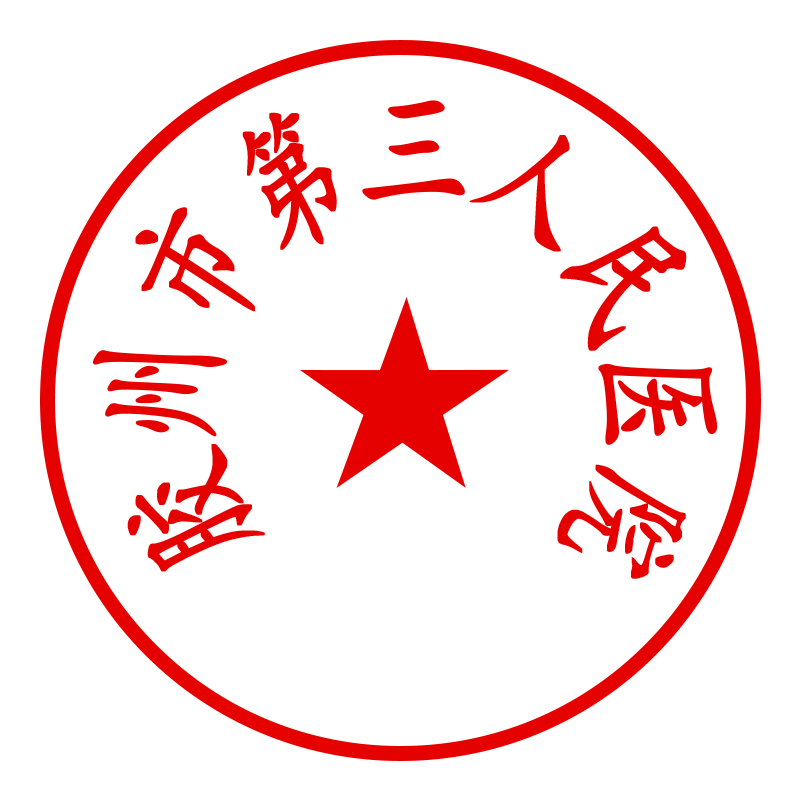
<style>
.page{position:relative;width:800px;height:800px;background:#ffffff}
.page>*{position:absolute;margin:0}
.t1{font:152.5px "KaiTi";letter-spacing:-0.1em;color:#e60101;font-weight:bold;scale:0.71 1}
</style>
<div class="page">
<p class="t1" style="left:92px;top:100px;width:626px;height:479px;rotate:-11deg">胶州市第三人民医院yuan院</p>
</div>
